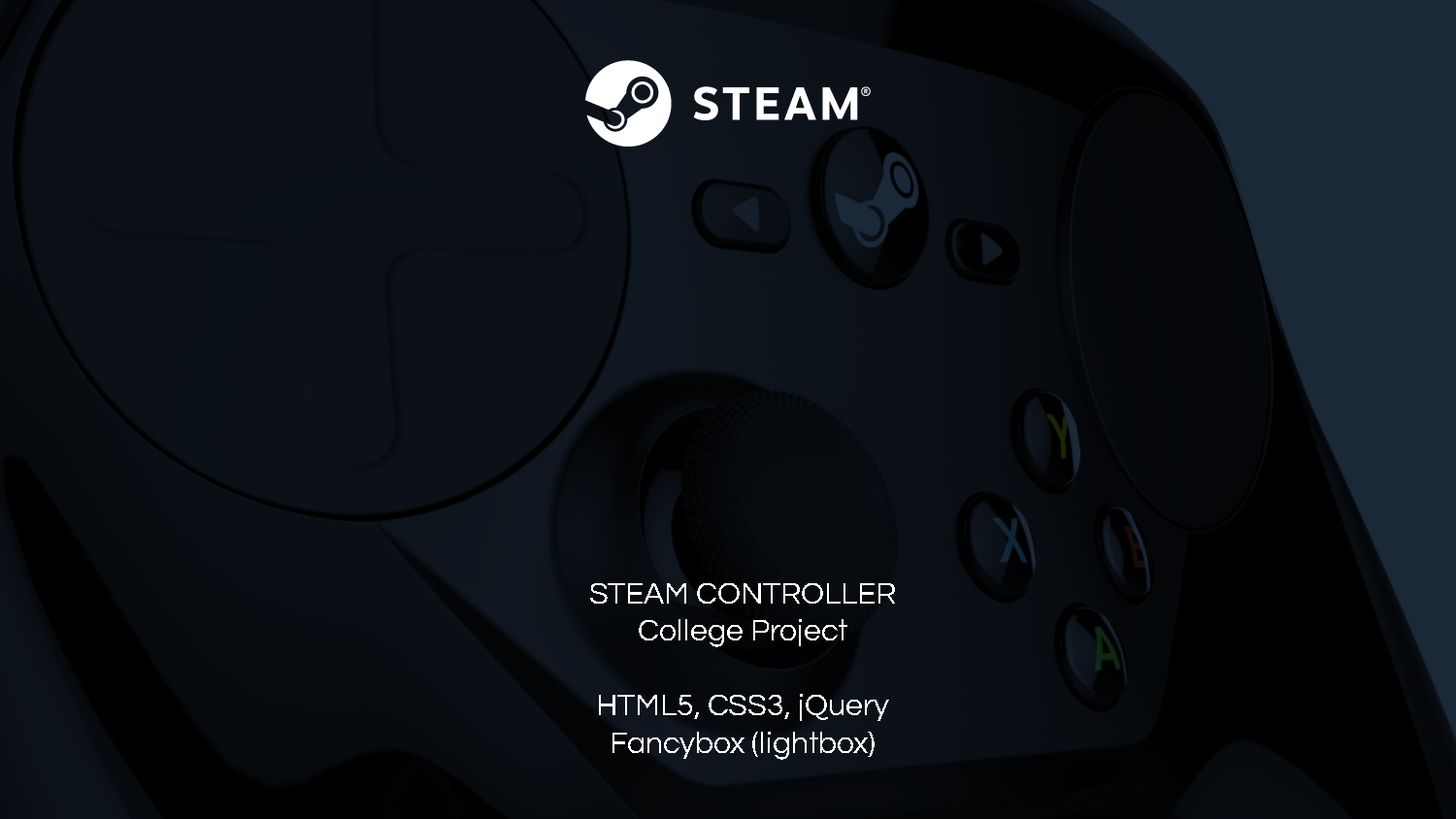
<style>
.page{position:relative;width:1456px;height:819px}
.page>*{position:absolute;margin:0}
.t1{font:31.1px "Questrial-Regular";color:#ffffff}
</style>
<div class="page">
<p class="t1" style="left:590px;top:583px;width:305px;height:177px;text-align:center">STEAM CONTROLLER<br>College Project<br><br>HTML5, CSS3, jQuery<br>Fancybox (lightbox)</p>
</div>
